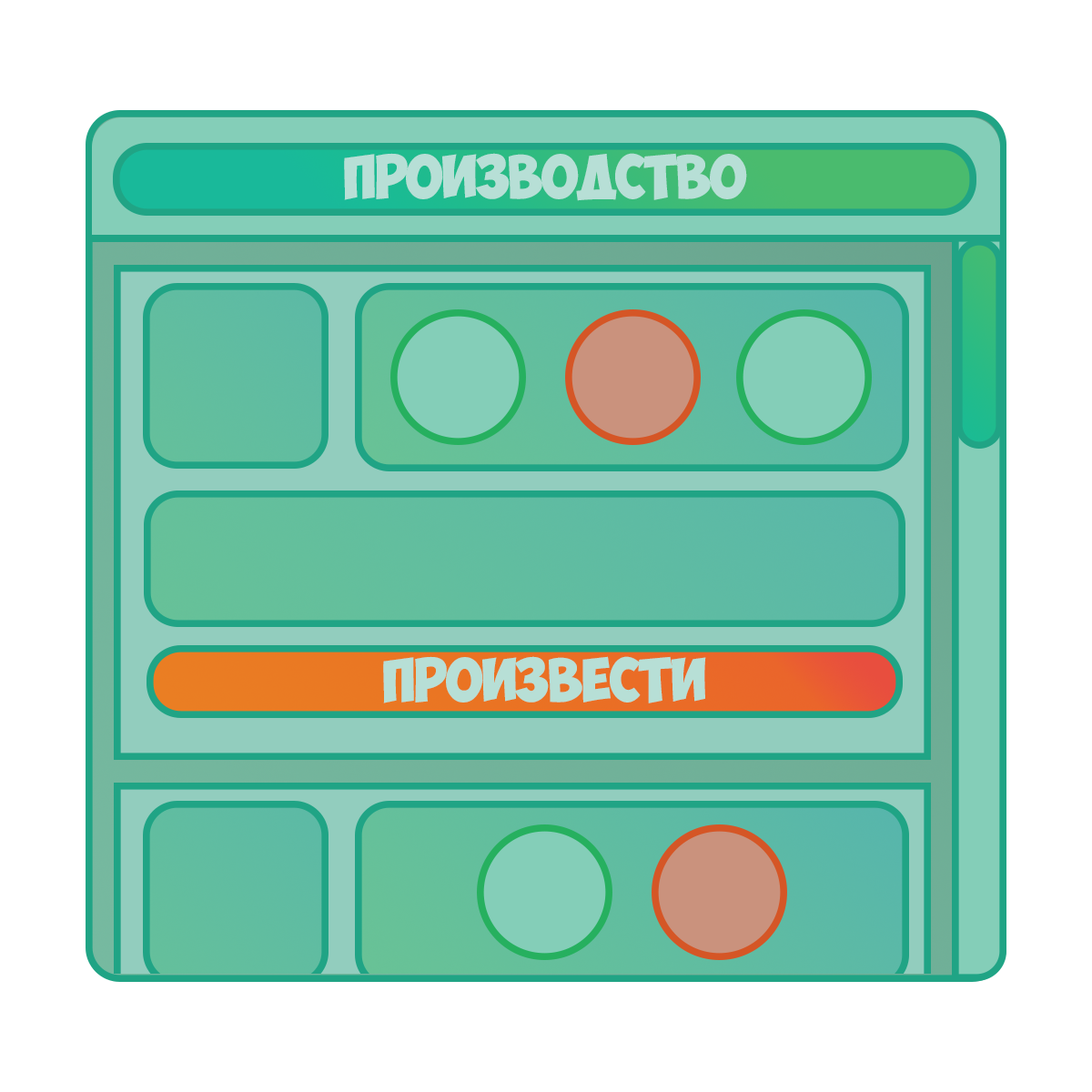
<style>
.page{position:relative;width:1092px;height:1092px;background:#ffffff}
.page>*{position:absolute;margin:0}
.t1{font:43.7px "ObelixPro";letter-spacing:-0.02em;color:#b7dfd6;scale:1.04 1}
</style>
<div class="page">
<p class="t1" style="left:344px;top:153px;width:403px;height:48px">ПРОИЗВОДСТВО</p>
<p class="t1" style="left:383px;top:656px;width:323px;height:47px">ПРоизвести</p>
</div>
